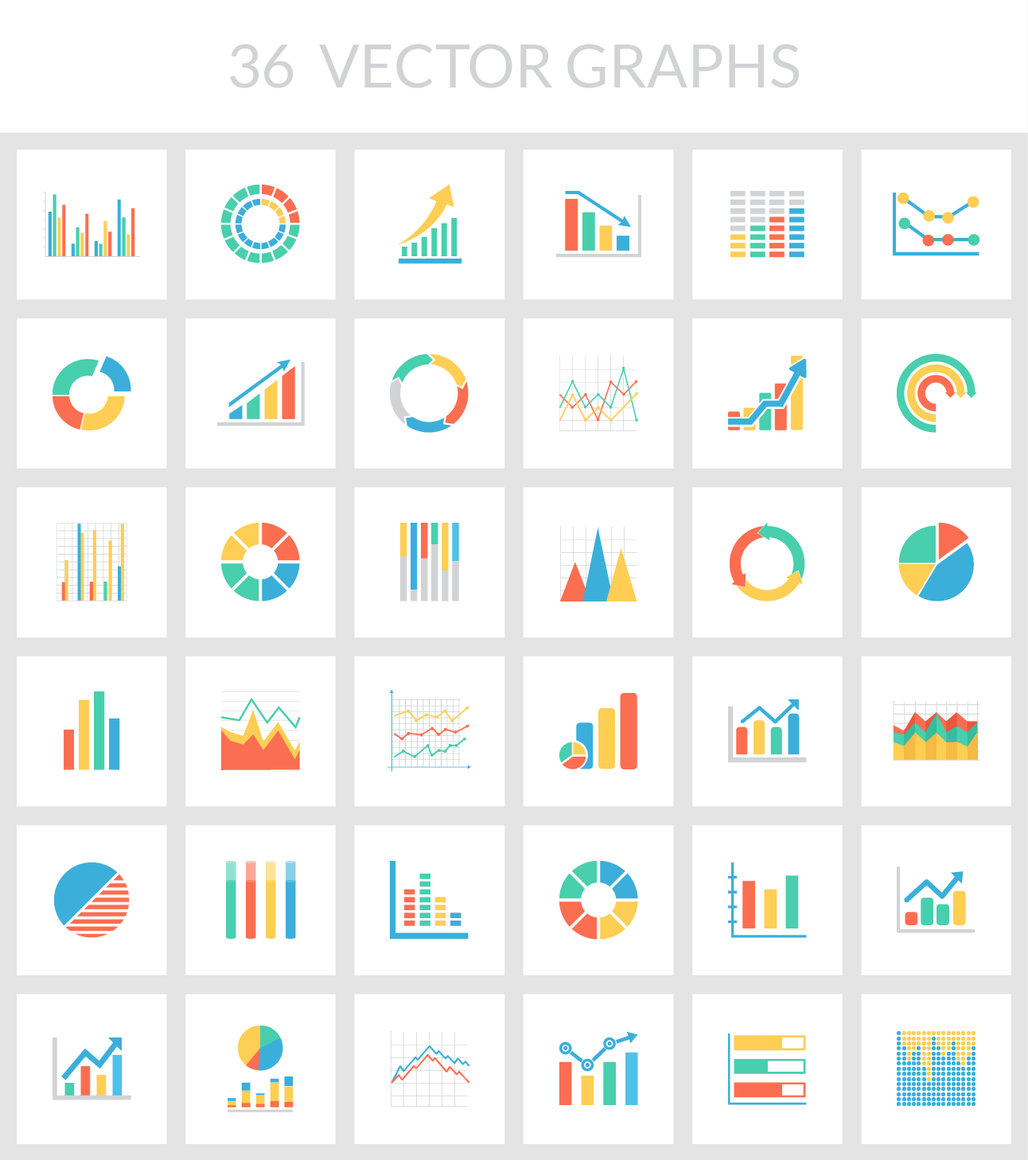
<style>
.page{position:relative;width:1028px;height:1160px;background:#ffffff}
.page>*{position:absolute;margin:0}
.t1{font:59.7px "Lato-Regular";color:#d1d3d4}
</style>
<div class="page">
<p class="t1" style="left:230px;top:44px;width:569px;height:44px">36  VECTOR GRAPHS</p>
</div>
